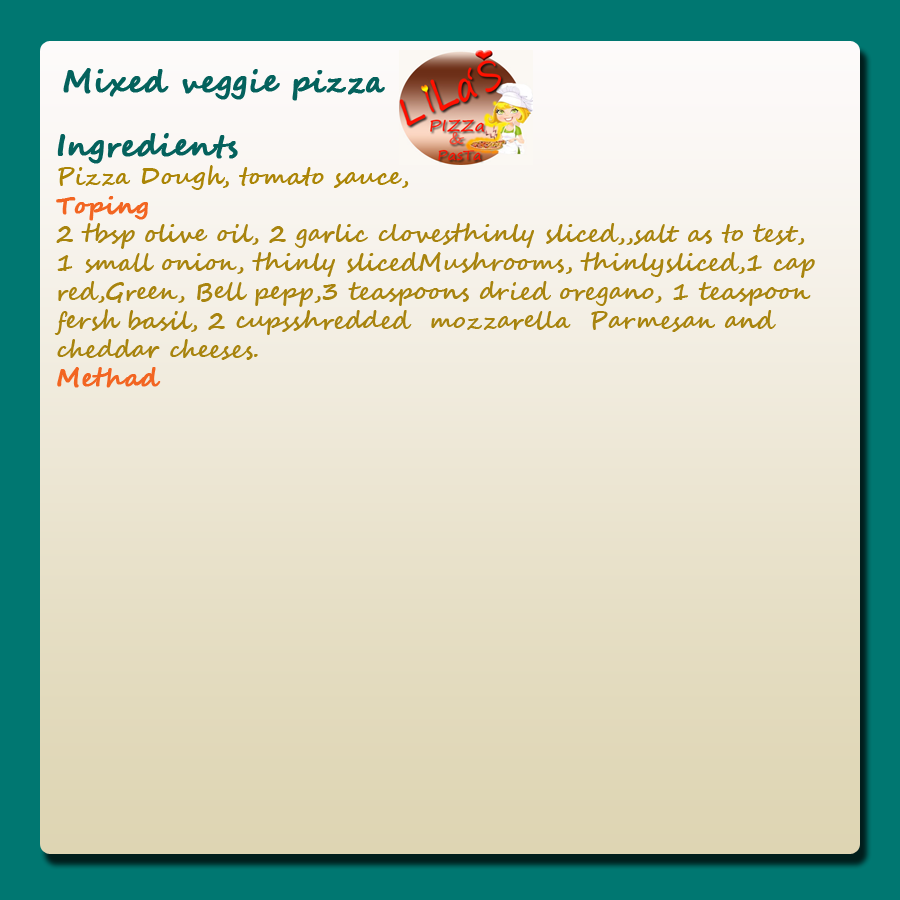
<style>
.page{position:relative;width:900px;height:900px}
.page>*{position:absolute;margin:0}
.t1{font:30px "SegoeScript-Bold";color:#04625d;font-weight:bold}
.t2{font:24px "SegoeScript-Bold";color:#a8840e}
.t3{font:24px "SegoeScript-Bold";color:#ab8506}
.t4{font:24px "SegoeScript-Bold";color:#f26522;font-weight:bold}
</style>
<div class="page">
<p class="t1" style="left:63px;top:68px;width:322px;height:33px">Mixed veggie pizza</p>
<p class="t2" style="left:54px;top:133px;width:761px;height:255px"><span class="t1">Ingredients<br></span><span class="t3">Pizza Dough, tomato sauce,<br></span><span class="t4">Toping<br></span>2 tbsp olive oil, 2 garlic clovesthinly sliced,,salt as to test,<br>1 small onion, thinly slicedMushrooms, thinlysliced,1 cap <br>red,Green, Bell pepp,3 teaspoons dried oregano, 1 teaspoon <br>fersh basil, 2 cupsshredded  mozzarella  Parmesan and <br>cheddar cheeses. <br><span class="t4">Methad</span></p>
</div>
